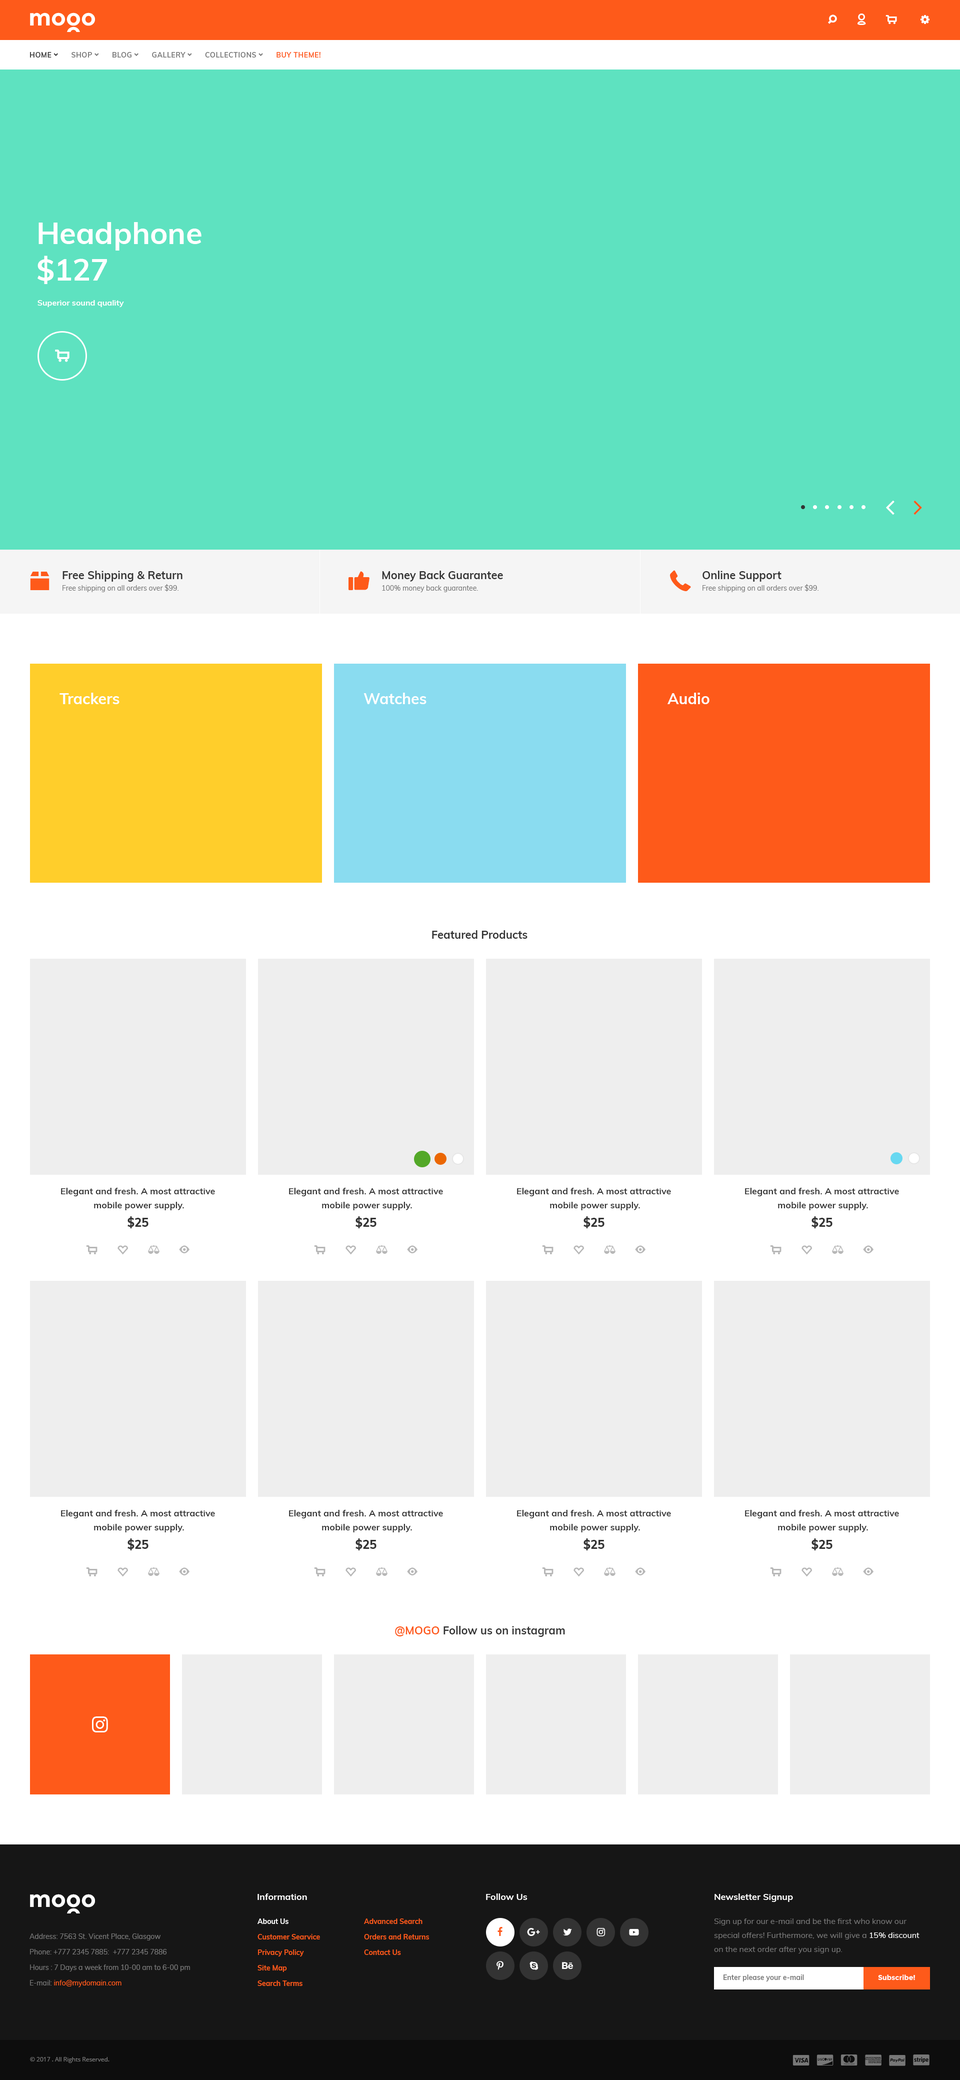
<style>
.page{position:relative;width:960px;height:2080px;background:#ffffff}
.page>*{position:absolute;margin:0}
.t1{font:30px/36.5px "Muli-Bold";color:#ffffff}
.t2{font:8px "Muli-Bold";color:#ffffff}
.t3{font:11px "Muli-Bold";color:#333333}
.t4{font:7px "Muli-Regular";color:#777777}
.t5{font:15px "Muli-Bold";color:#ffffff}
.t6{font:9px/14px "Muli-Bold";color:#333333}
.t7{font:12px "Muli-ExtraBold";color:#333333}
.t8{font:11px "Muli-Bold";color:#fe5a1a}
.t9{font:23px "Montserrat-Bold";color:#ffffff}
.t10{font:9px "Muli-Bold";color:#ffffff}
.t11{font:7px/15.5px "Muli-Bold";color:#fe5a1a}
.t12{font:7px/15.5px "Muli-Bold";color:#ffffff}
.t13{font:8px/14px "Muli-Regular";color:#777777}
.t14{font:8px/14px "Muli-Regular";color:#ffffff}
.t15{font:7px/15.5px "Muli-Regular";color:#777777}
.t16{font:7px/15.5px "Muli-Regular";color:#fe5a1a}
.t17{font:7px "Muli-Bold";color:#777777}
.t18{font:7px "Montserrat-Bold";color:#ffffff}
.t19{font:6px "OpenSans";color:#777777}
</style>
<div class="page">
<p class="t1" style="left:38px;top:222px;width:164px;height:62px">Headphone<br>$127</p>
<p class="t2" style="left:38px;top:300px;width:86px;height:8px">Superior sound quality</p>
<p class="t3" style="left:62px;top:570px;width:120px;height:12px">Free Shipping &amp; Return</p>
<p class="t3" style="left:382px;top:570px;width:121px;height:12px">Money Back Guarantee</p>
<p class="t3" style="left:702px;top:570px;width:80px;height:12px">Online Support</p>
<p class="t4" style="left:62px;top:584px;width:116px;height:8px">Free shipping on all orders over $99.</p>
<p class="t4" style="left:382px;top:585px;width:96px;height:7px">100% money back guarantee.</p>
<p class="t4" style="left:702px;top:584px;width:116px;height:8px">Free shipping on all orders over $99.</p>
<p class="t5" style="left:60px;top:692px;width:60px;height:12px">Trackers</p>
<p class="t5" style="left:364px;top:692px;width:62px;height:12px">Watches</p>
<p class="t5" style="left:668px;top:692px;width:42px;height:12px">Audio</p>
<p class="t3" style="left:432px;top:930px;width:96px;height:8px">Featured Products</p>
<p class="t6" style="left:61px;top:1188px;width:154px;height:22px;text-align:center">Elegant and fresh. A most attractive <br>mobile power supply.</p>
<p class="t6" style="left:289px;top:1188px;width:154px;height:22px;text-align:center">Elegant and fresh. A most attractive <br>mobile power supply.</p>
<p class="t6" style="left:517px;top:1188px;width:154px;height:22px;text-align:center">Elegant and fresh. A most attractive <br>mobile power supply.</p>
<p class="t6" style="left:745px;top:1188px;width:154px;height:22px;text-align:center">Elegant and fresh. A most attractive <br>mobile power supply.</p>
<p class="t7" style="left:128px;top:1216px;width:20px;height:12px">$25</p>
<p class="t7" style="left:356px;top:1216px;width:20px;height:12px">$25</p>
<p class="t7" style="left:584px;top:1216px;width:20px;height:12px">$25</p>
<p class="t7" style="left:812px;top:1216px;width:20px;height:12px">$25</p>
<p class="t6" style="left:61px;top:1510px;width:154px;height:22px;text-align:center">Elegant and fresh. A most attractive <br>mobile power supply.</p>
<p class="t6" style="left:289px;top:1510px;width:154px;height:22px;text-align:center">Elegant and fresh. A most attractive <br>mobile power supply.</p>
<p class="t6" style="left:517px;top:1510px;width:154px;height:22px;text-align:center">Elegant and fresh. A most attractive <br>mobile power supply.</p>
<p class="t6" style="left:745px;top:1510px;width:154px;height:22px;text-align:center">Elegant and fresh. A most attractive <br>mobile power supply.</p>
<p class="t7" style="left:128px;top:1538px;width:20px;height:12px">$25</p>
<p class="t7" style="left:356px;top:1538px;width:20px;height:12px">$25</p>
<p class="t7" style="left:584px;top:1538px;width:20px;height:12px">$25</p>
<p class="t7" style="left:812px;top:1538px;width:20px;height:12px">$25</p>
<p class="t3" style="left:395px;top:1626px;width:170px;height:10px"><span class="t8">@MOGO</span> Follow us on instagram</p>
<p class="t9" style="left:30px;top:1894px;width:65px;height:13px">mooo</p>
<p class="t10" style="left:258px;top:1893px;width:49px;height:7px">Information</p>
<p class="t10" style="left:486px;top:1893px;width:42px;height:7px">Follow Us</p>
<p class="t10" style="left:714px;top:1893px;width:79px;height:9px">Newsletter Signup</p>
<p class="t11" style="left:258px;top:1918px;width:62px;height:68px"><span class="t12">About Us<br></span>Customer Searvice<br>Privacy Policy<br>Site Map<br>Search Terms</p>
<p class="t11" style="left:364px;top:1918px;width:65px;height:36px">Advanced Search<br>Orders and Returns<br>Contact Us</p>
<p class="t13" style="left:714px;top:1918px;width:206px;height:36px">Sign up for our e-mail and be the first who know our special offers! Furthermore, we will give a <span class="t14">15% discount </span>on the next order after you sign up.</p>
<p class="t15" style="left:30px;top:1933px;width:160px;height:54px">Address: 7563 St. Vicent Place, Glasgow<br>Phone: +777 2345 7885:  +777 2345 7886<br>Hours : 7 Days a week from 10-00 am to 6-00 pm<br>E-mail:<span class="t16"> info@mydomain.com</span></p>
<p class="t17" style="left:724px;top:1974px;width:80px;height:8px">Enter please your e-mail</p>
<p class="t18" style="left:878px;top:1974px;width:37px;height:6px">Subscribe!</p>
<p class="t19" style="left:30px;top:2056px;width:80px;height:6px">© 2017 . All Rights Reserved.</p>
</div>
